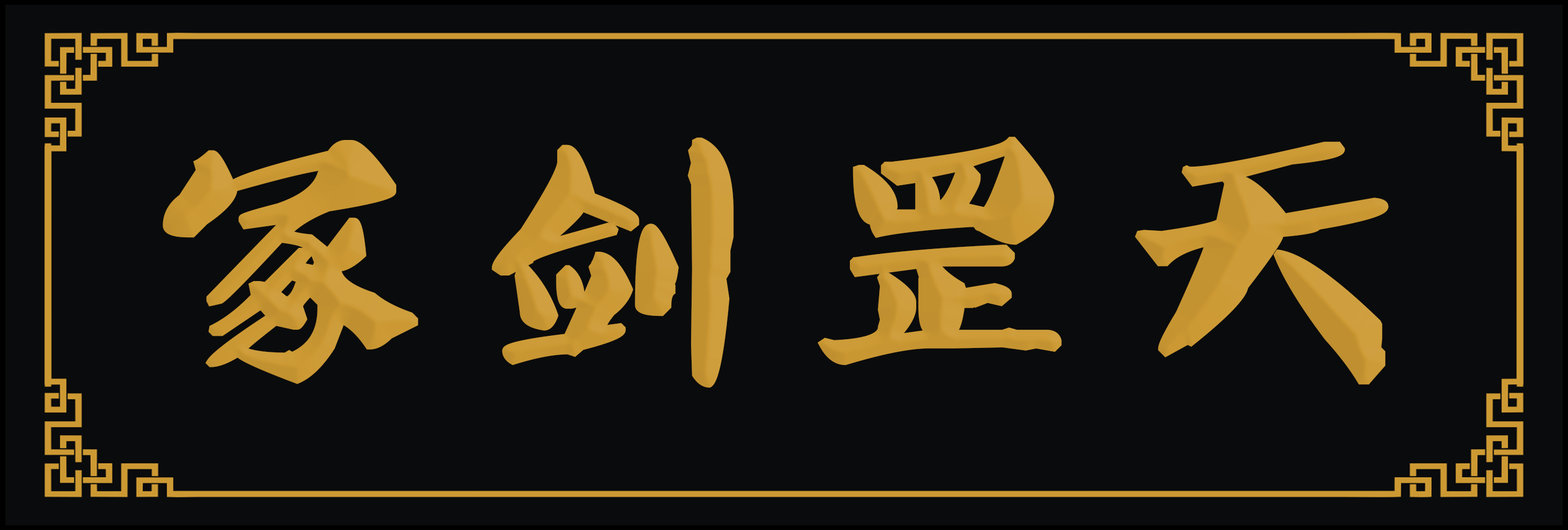
<style>
.page{position:relative;width:1568px;height:530px;background:#0a0b0c}
.page>*{position:absolute;margin:0}
.t1{font:265.5px "-";letter-spacing:0.2em;color:#cc9933;font-weight:bold}
</style>
<div class="page">
<p class="t1" style="left:163px;top:137px;width:1226px;height:251px">冢剑罡天</p>
</div>
